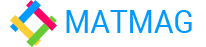
<style>
.page{position:relative;width:206px;height:47px;background:#ffffff}
.page>*{position:absolute;margin:0}
.t1{font:32.2px "Roboto-Regular";color:#0099ff;scale:0.93 1}
</style>
<div class="page">
<p class="t1" style="left:66px;top:10px;width:126px;height:23px">MATMAG</p>
</div>
